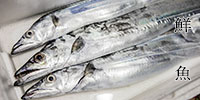
<style>
.page{position:relative;width:200px;height:100px}
.page>*{position:absolute;margin:0}
.t1{font:17.6px/24px "YuMincho-Regular";color:#000000;scale:0.91 1}
</style>
<div class="page">
<p class="t1" style="left:174px;top:17px;width:18px;height:64px;text-align:justify">鮮　　魚</p>
</div>
